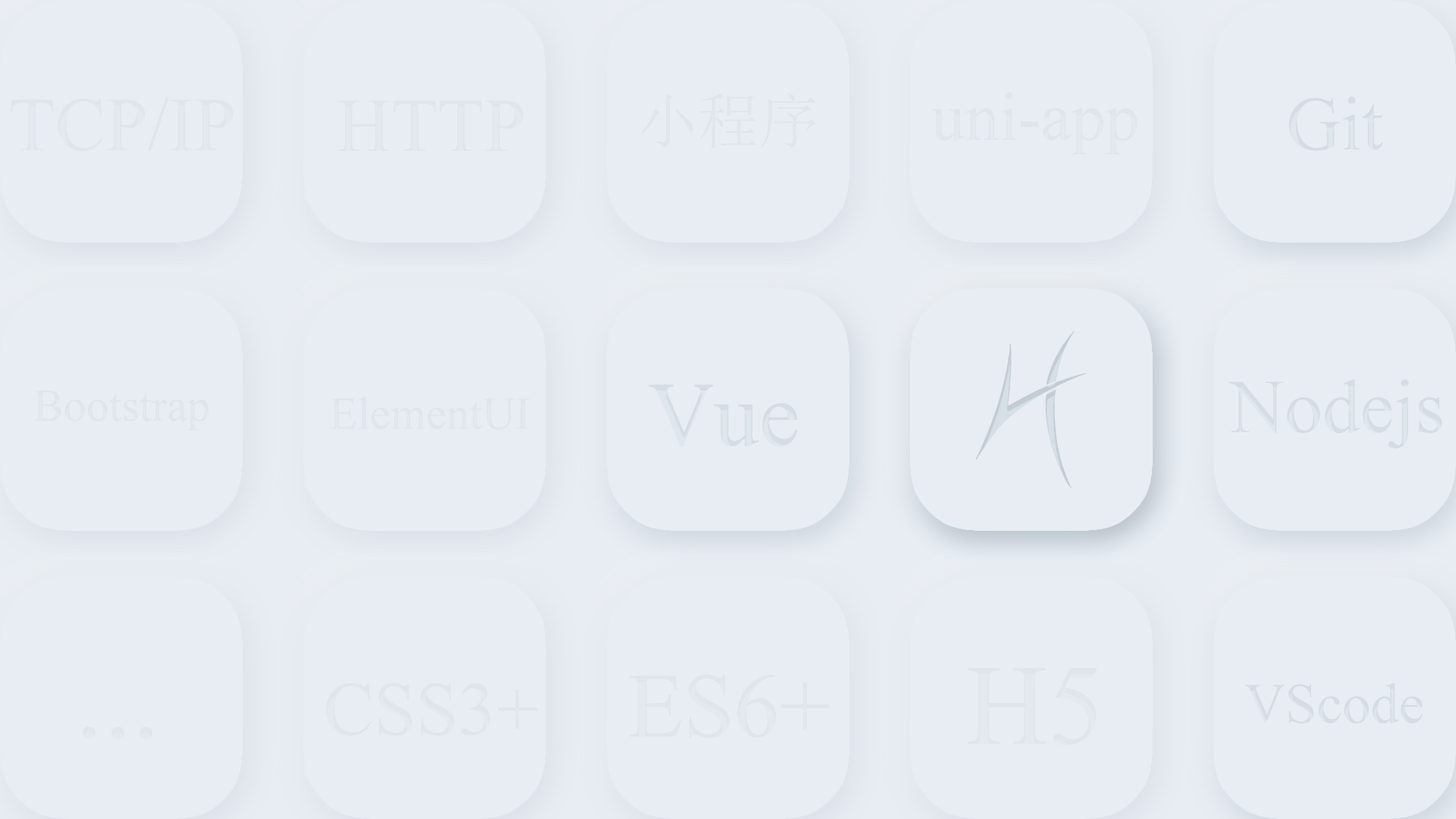
<style>
.page{position:relative;width:1456px;height:819px;background:#e8edf3}
.page>*{position:absolute;margin:0}
.t1{font:75.8px "TimesNewRomanPSMT";color:#d7dfe6}
.t2{font:61px "SimSun";color:#d7dfe6}
.t3{font:68.2px "TimesNewRomanPSMT";color:#d7dfe6}
.t4{font:151.7px "Threadz-Needle";color:#d7dfe6}
.t5{font:91px "TimesNewRomanPSMT";color:#d7dfe6}
.t6{font:45.5px "TimesNewRomanPSMT";color:#d7dfe6}
.t7{font:45.9px "TimesNewRomanPSMT";color:#d7dfe6}
.t8{font:113.7px "TimesNewRomanPSMT";color:#d7dfe6}
.t9{font:56.9px "TimesNewRomanPSMT";color:#d7dfe6}
</style>
<div class="page">
<p class="t1" style="left:11px;top:97px;width:223px;height:55px;opacity:0.5">TCP/IP</p>
<p class="t1" style="left:337px;top:100px;width:186px;height:51px;opacity:0.5">HTTP</p>
<p class="t2" style="left:641px;top:93px;width:176px;height:56px;opacity:0.5">小程序</p>
<p class="t3" style="left:931px;top:92px;width:206px;height:63px;opacity:0.5">uni-app</p>
<p class="t1" style="left:1288px;top:96px;width:95px;height:55px">Git</p>
<p class="t4" style="left:976px;top:331px;width:111px;height:157px">H</p>
<p class="t5" style="left:648px;top:384px;width:150px;height:63px">Vue</p>
<p class="t1" style="left:1228px;top:379px;width:214px;height:70px">Nodejs</p>
<p class="t6" style="left:33px;top:391px;width:176px;height:40px;opacity:0.5">Bootstrap</p>
<p class="t7" style="left:330px;top:397px;width:200px;height:33px;opacity:0.5">ElementUI</p>
<p class="t5" style="left:629px;top:674px;width:200px;height:64px;opacity:0.5">ES6+</p>
<p class="t8" style="left:967px;top:668px;width:130px;height:77px;opacity:0.5">H5</p>
<p class="t1" style="left:326px;top:682px;width:212px;height:54px;opacity:0.5">CSS3+</p>
<p class="t9" style="left:1244px;top:682px;width:179px;height:41px">VScode</p>
<p class="t8" style="left:83px;top:726px;width:69px;height:13px;opacity:0.5">...</p>
</div>
